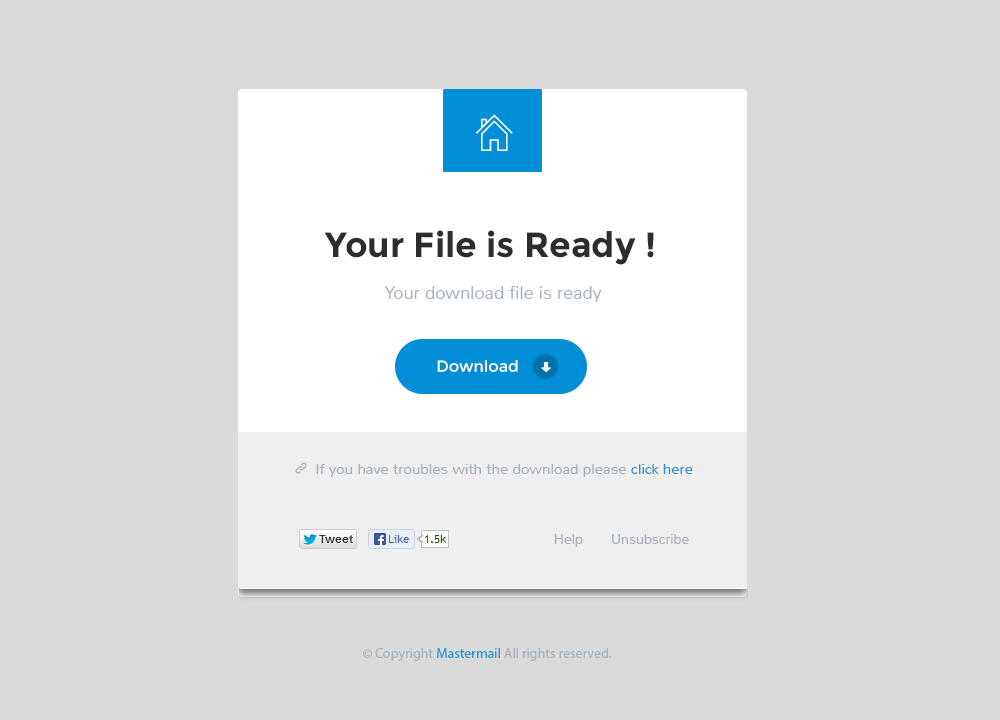
<style>
.page{position:relative;width:1000px;height:720px;background:#dadada}
.page>*{position:absolute;margin:0}
.t1{font:35px "Montserrat-Bold";color:#2d2d2d}
.t2{font:18px "Nunito-Light";color:#a7b2bf}
.t3{font:16px "Montserrat-Regular";color:#ffffff}
.t4{font:15px "Nunito-Light";color:#a7b2bf}
.t5{font:15px "Nunito-Light";color:#368bc0}
.t6{font:14px "Nunito-Light";color:#a7b2bf}
.t7{font:14px "MyriadPro-Regular";color:#a7b2bf}
.t8{font:14px "MyriadPro-Regular";color:#2796cd}
</style>
<div class="page">
<p class="t1" style="left:324px;top:230px;width:330px;height:35px">Your File is Ready !</p>
<p class="t2" style="left:384px;top:286px;width:218px;height:16px">Your download file is ready</p>
<p class="t3" style="left:437px;top:360px;width:81px;height:12px">Download</p>
<p class="t4" style="left:316px;top:464px;width:377px;height:13px">If you have troubles with the download please<span class="t5"> click here</span></p>
<p class="t6" style="left:554px;top:534px;width:135px;height:13px">Help       Unsubscribe</p>
<p class="t7" style="left:363px;top:648px;width:248px;height:14px">© Copyright <span class="t8">Mastermail </span>All rights reserved.</p>
</div>
